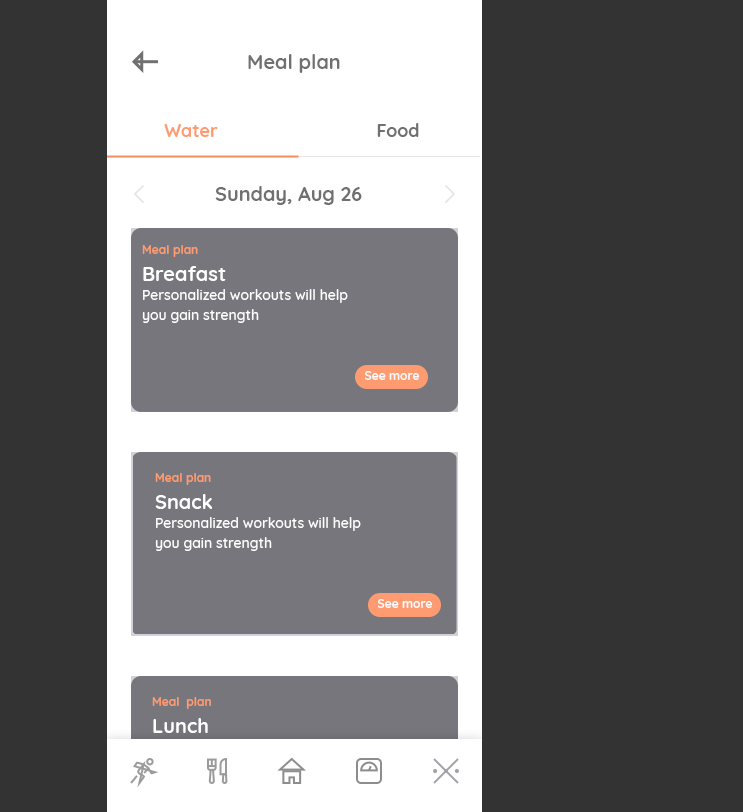
<style>
.page{position:relative;width:743px;height:812px;background:#333333}
.page>*{position:absolute;margin:0}
.t1{font:20px "Quicksand-Bold";color:#707070}
.t2{font:18px "Quicksand-Bold";color:#ff9b70}
.t3{font:18px "Quicksand-Bold";color:#707070}
.t4{font:12px "Quicksand-Bold";color:#ff9b70}
.t5{font:20px "Quicksand-Bold";color:#ffffff}
.t6{font:14px/20px "Quicksand-Medium";color:#ffffff}
.t7{font:12px "Quicksand-Bold";color:#fbf9f9}
</style>
<div class="page">
<p class="t1" style="left:248px;top:54px;width:92px;height:19px">Meal plan</p>
<p class="t2" style="left:164px;top:124px;width:54px;height:13px">Water</p>
<p class="t3" style="left:377px;top:123px;width:42px;height:14px">Food</p>
<p class="t1" style="left:215px;top:186px;width:147px;height:19px">Sunday, Aug 26</p>
<p class="t4" style="left:142px;top:245px;width:56px;height:12px">Meal plan</p>
<p class="t5" style="left:143px;top:266px;width:83px;height:15px">Breafast</p>
<p class="t6" style="left:142px;top:289px;width:206px;height:34px">Personalized workouts will help you gain strength</p>
<p class="t7" style="left:365px;top:371px;width:55px;height:9px">See more</p>
<p class="t4" style="left:155px;top:473px;width:56px;height:12px">Meal plan</p>
<p class="t5" style="left:155px;top:494px;width:58px;height:15px">Snack</p>
<p class="t6" style="left:155px;top:517px;width:206px;height:34px">Personalized workouts will help you gain strength</p>
<p class="t7" style="left:378px;top:599px;width:55px;height:9px">See more</p>
<p class="t4" style="left:152px;top:697px;width:59px;height:12px">Meal  plan</p>
<p class="t5" style="left:153px;top:718px;width:55px;height:15px">Lunch</p>
</div>
